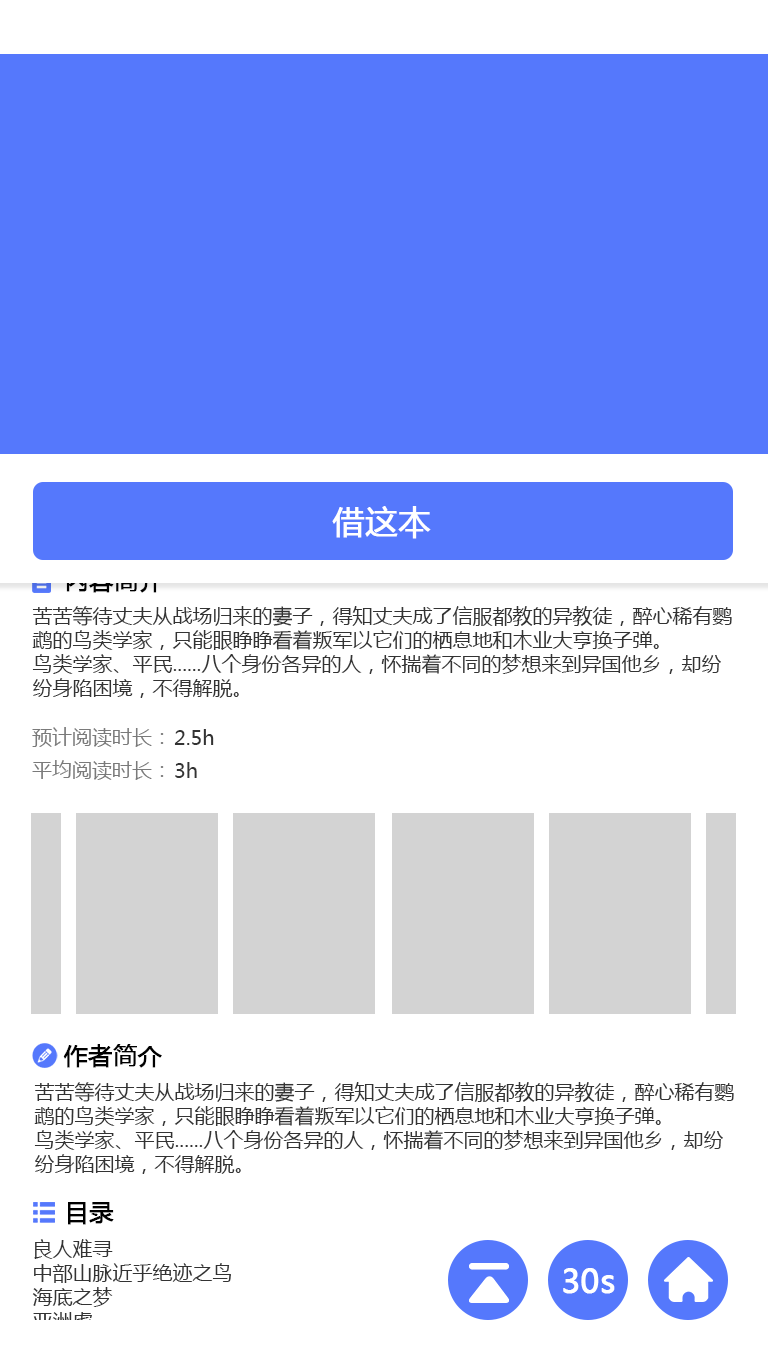
<style>
.page{position:relative;width:768px;height:1360px;background:#ffffff}
.page>*{position:absolute;margin:0}
.t1{font:32px "MicrosoftYaHei";color:#ffffff;font-weight:bold}
.t2{font:24px "MicrosoftYaHei";font-weight:bold}
.t3{font:20px/24px "MicrosoftYaHei";color:#333333}
.t4{font:20px "MicrosoftYaHei";color:#7a7a7a}
.t5{font:20px "MicrosoftYaHei";color:#333333}
.t6{font:24px "MicrosoftYaHei";color:#000000;font-weight:bold}
</style>
<div class="page">
<p class="t1" style="left:332px;top:506px;width:99px;height:33px">借这本</p>
<p class="t2" style="left:66px;top:569px;width:97px;height:24px">内容简介</p>
<p class="t3" style="left:32px;top:606px;width:700px;height:92px">苦苦等待丈夫从战场归来的妻子，得知丈夫成了信服都教的异教徒，醉心稀有鹦鹉的鸟类学家，只能眼睁睁看着叛军以它们的栖息地和木业大亨换子弹。<br>鸟类学家、平民......八个身份各异的人，怀揣着不同的梦想来到异国他乡，却纷纷身陷困境，不得解脱。</p>
<p class="t4" style="left:32px;top:727px;width:132px;height:20px">预计阅读时长：</p>
<p class="t5" style="left:174px;top:729px;width:40px;height:16px">2.5h</p>
<p class="t4" style="left:32px;top:760px;width:132px;height:20px">平均阅读时长：</p>
<p class="t5" style="left:175px;top:762px;width:22px;height:16px">3h</p>
<p class="t6" style="left:63px;top:1044px;width:99px;height:24px">作者简介</p>
<p class="t3" style="left:34px;top:1082px;width:700px;height:92px">苦苦等待丈夫从战场归来的妻子，得知丈夫成了信服都教的异教徒，醉心稀有鹦鹉的鸟类学家，只能眼睁睁看着叛军以它们的栖息地和木业大亨换子弹。<br>鸟类学家、平民......八个身份各异的人，怀揣着不同的梦想来到异国他乡，却纷纷身陷困境，不得解脱。</p>
<p class="t6" style="left:68px;top:1202px;width:46px;height:23px">目录</p>
<p class="t1" style="left:563px;top:1268px;width:52px;height:26px">30s</p>
</div>
